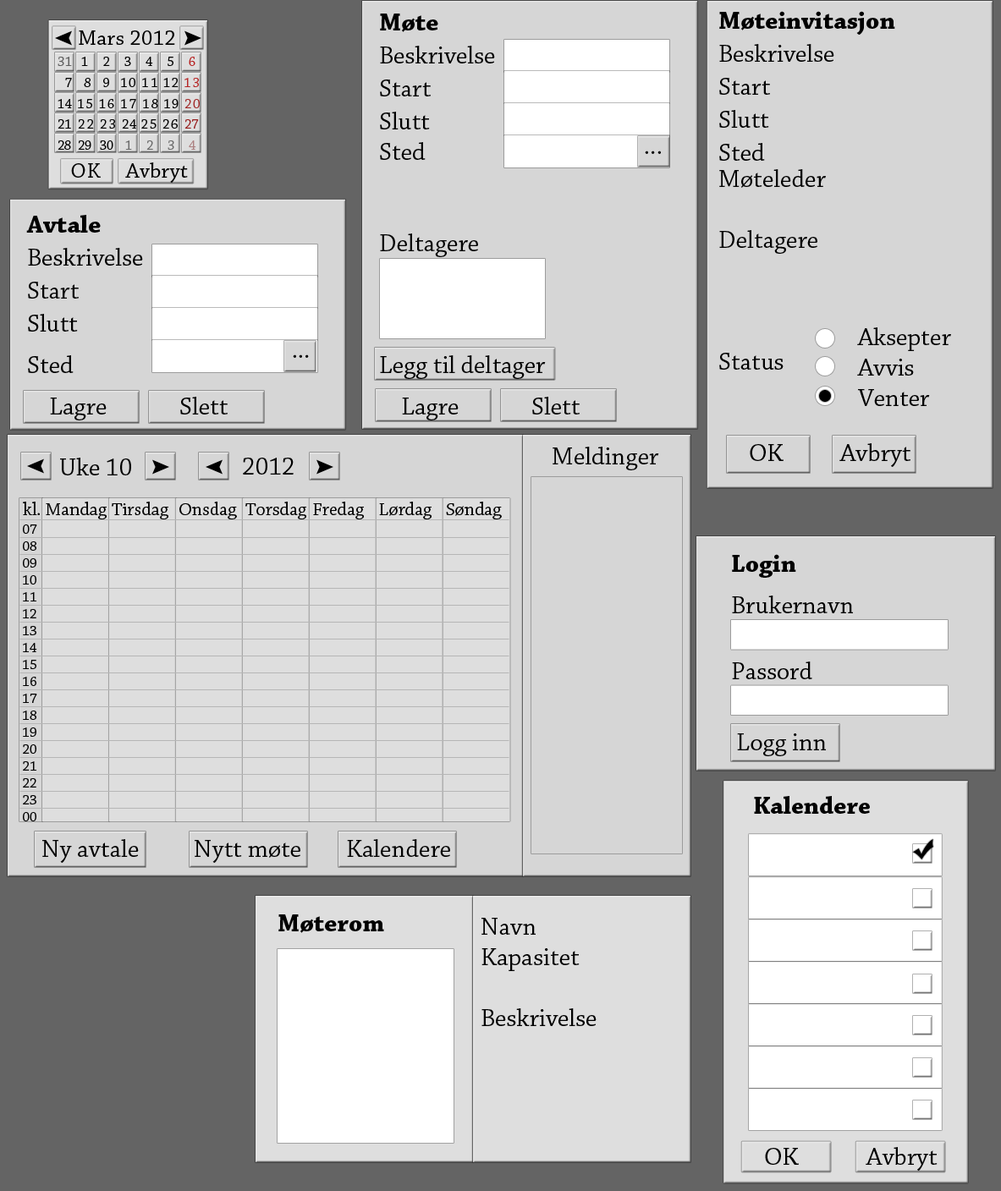
<style>
.page{position:relative;width:1001px;height:1191px;background:#d6d6d6}
.page>*{position:absolute;margin:0}
.t1{font:25.4px/33px "ChaparralPro-Regular";color:#000000}
.t2{font:25.4px/33px "ChaparralPro-Bold";color:#000000}
.t3{font:25.4px "ChaparralPro-Regular";color:#000000}
.t4{font:25.4px/19.5px "ChaparralPro-Regular";color:#000000}
.t5{font:25.4px/41.5px "ChaparralPro-Regular";color:#000000}
.t6{font:25.4px/26.2px "ChaparralPro-Regular";color:#000000}
.t7{font:21.4px "ChaparralPro-Regular";letter-spacing:0.02em;color:#000000}
.t8{font:13.5px/20.8px "ChaparralPro-Regular";letter-spacing:-0.04em;color:#696969}
.t9{font:13.5px/20.8px "ChaparralPro-Regular";letter-spacing:0.02em;color:#5e5e5e}
.t10{font:13.5px/20.8px "ChaparralPro-Regular";letter-spacing:0.42em;color:#000000}
.t11{font:13.5px/20.8px "ChaparralPro-Regular";letter-spacing:0.42em;color:#b72020}
.t12{font:13.5px/20.8px "ChaparralPro-Regular";letter-spacing:0.325em;color:#000000}
.t13{font:13.5px/20.8px "ChaparralPro-Regular";letter-spacing:0.285em;color:#000000}
.t14{font:13.5px/20.8px "ChaparralPro-Regular";letter-spacing:0.065em;color:#000000}
.t15{font:13.5px/20.8px "ChaparralPro-Regular";letter-spacing:0.16em;color:#000000}
.t16{font:13.5px/20.8px "ChaparralPro-Regular";letter-spacing:0.08em;color:#000000}
.t17{font:13.5px/20.8px "ChaparralPro-Regular";letter-spacing:0.1em;color:#000000}
.t18{font:13.5px/20.8px "ChaparralPro-Regular";letter-spacing:0.1em;color:#b62626}
.t19{font:13.5px/20.8px "ChaparralPro-Regular";color:#b62626}
.t20{font:13.5px/20.8px "ChaparralPro-Regular";color:#000000}
.t21{font:13.5px/20.8px "ChaparralPro-Regular";letter-spacing:0.12em;color:#000000}
.t22{font:13.5px/20.8px "ChaparralPro-Regular";letter-spacing:0.1em;color:#a12a2a}
.t23{font:13.5px/20.8px "ChaparralPro-Regular";color:#a12a2a}
.t24{font:13.5px/20.8px "ChaparralPro-Regular";letter-spacing:0.02em;color:#000000}
.t25{font:13.5px/20.8px "ChaparralPro-Regular";letter-spacing:0.14em;color:#000000}
.t26{font:13.5px/20.8px "ChaparralPro-Regular";letter-spacing:-0.04em;color:#971e1e}
.t27{font:13.5px/20.8px "ChaparralPro-Regular";letter-spacing:-0.04em;color:#000000}
.t28{font:13.5px/20.8px "ChaparralPro-Regular";letter-spacing:-0.02em;color:#000000}
.t29{font:13.5px/20.8px "ChaparralPro-Regular";letter-spacing:-0.04em;color:#ab7f7f}
.t30{font:18.6px "ChaparralPro-Regular";color:#000000}
.t31{font:14.1px "ChaparralPro-Regular";color:#000000}
.t32{font:25.4px "ChaparralPro-Bold";color:#000000}
.t33{font:25.4px/35.5px "ChaparralPro-Regular";color:#000000}
.t34{font:25.4px/16.1px "ChaparralPro-Regular";color:#000000}
</style>
<div class="page">
<p class="t1" style="left:380px;top:14px;width:200px;height:407px"><span class="t2">Møte<br></span>Beskrivelse<br>Start<br>Slutt<br><span class="t3">Sted<br><br><br>Deltagere<br><br><br></span><span class="t4"><br>Legg til deltager</span><span class="t5">  <br>    Lagre    Slett</span></p>
<p class="t3" style="left:719px;top:11px;width:191px;height:456px"><span class="t2">Møteinvitasjon<br></span><span class="t1">Beskrivelse<br>Start<br>Slutt<br>Sted<br></span><span class="t6">Møteleder<br></span><br>Deltagere<br><br><br><br>Status<br><br> <br> OK  Avbryt</p>
<p class="t7" style="left:79px;top:30px;width:96px;height:15px">Mars 2012</p>
<p class="t8" style="left:58px;top:57px;width:142px;height:93px"><span class="t9">31 </span><span class="t10">1 2 3 4 5 </span><span class="t11">6<br></span><span class="t12"> 7 8 </span><span class="t13">9 </span><span class="t14">10</span><span class="t15"> 1</span><span class="t16">1 1</span><span class="t17">2 </span><span class="t18">1</span><span class="t19">3<br></span><span class="t20">1</span><span class="t17">4 15 1</span><span class="t21">6 17 1</span><span class="t16">8 1</span><span class="t17">9 </span><span class="t22">2</span><span class="t23">0<br></span><span class="t20">2</span><span class="t21">1 22 23 </span><span class="t24">24</span><span class="t17"> 25 2</span><span class="t25">6 </span><span class="t26">27<br></span><span class="t27">28   2</span><span class="t28">9   3</span><span class="t27">0     </span>1      2      3      <span class="t29">4</span></p>
<p class="t3" style="left:645px;top:151px;width:16px;height:3px">...</p>
<p class="t7" style="left:71px;top:162px;width:117px;height:21px">OK     Avbryt</p>
<p class="t1" style="left:26px;top:215px;width:202px;height:206px"><span class="t2">Avtale<br></span>Beskrivelse<br>Start<br>Slutt<br>Sted<span class="t5">  <br>    Lagre    Slett</span></p>
<p class="t3" style="left:857px;top:327px;width:94px;height:79px">Aksepter<br>Avvis<br>Venter</p>
<p class="t3" style="left:293px;top:355px;width:16px;height:3px">...</p>
<p class="t3" style="left:553px;top:447px;width:106px;height:23px">Meldinger</p>
<p class="t3" style="left:60px;top:458px;width:71px;height:18px">Uke 10</p>
<p class="t3" style="left:243px;top:458px;width:51px;height:17px">2012</p>
<p class="t30" style="left:23px;top:502px;width:479px;height:18px">kl. Mandag Tirsdag Onsdag Torsdag Fredag Lørdag Søndag</p>
<p class="t31" style="left:23px;top:525px;width:14px;height:297px">07<br>08<br>09<br>10<br>11<br>12<br>13<br>14<br>15<br>16<br>17<br>18<br>19<br>20<br>21<br>22<br>23<br>00</p>
<p class="t32" style="left:732px;top:554px;width:64px;height:24px">Login</p>
<p class="t3" style="left:732px;top:596px;width:121px;height:17px">Brukernavn</p>
<p class="t33" style="left:732px;top:662px;width:94px;height:94px"><span class="t3">Passord<br></span><br> Logg inn</p>
<p class="t34" style="left:754px;top:796px;width:183px;height:375px"><span class="t32">Kalendere<br><br><br><br><br><br><br><br><br><br><br><br></span>  OK      Avbry<span class="t3">t</span></p>
<p class="t3" style="left:42px;top:839px;width:408px;height:24px">Ny avtale  Nytt møte  Kalendere</p>
<p class="t32" style="left:278px;top:915px;width:106px;height:18px">Møterom</p>
<p class="t3" style="left:481px;top:918px;width:116px;height:108px">Navn<br>Kapasitet<br><br>Beskrivelse</p>
</div>
